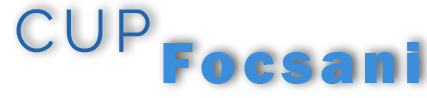
<style>
.page{position:relative;width:427px;height:98px;background:#ffffff}
.page>*{position:absolute;margin:0}
.t1{font:60px/31px "FranklinGothic-Heavy";letter-spacing:0.115em;color:#3b8edc}
.t2{font:60px/31px "Raleway-Regular";letter-spacing:0.115em;color:#2165ae}
</style>
<div class="page">
<p class="t1" style="left:16px;top:9px;width:403px;height:75px;text-align:center"><span class="t2">CUP<br>                   </span>Focsani</p>
</div>
